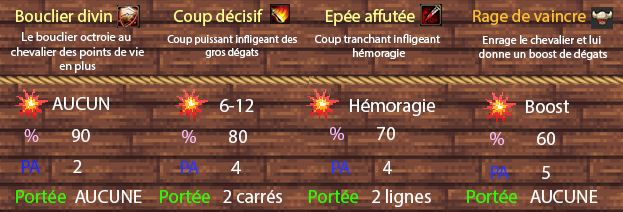
<style>
.page{position:relative;width:623px;height:212px}
.page>*{position:absolute;margin:0}
.t1{font:17.3px "MyriadPro-Regular";color:#feff8d}
.t2{font:17.3px "MyriadPro-Regular";color:#ffc12b}
.t3{font:12.2px "MyriadPro-Regular";color:#ffffff}
.t4{font:11px "MyriadPro-Regular";color:#ffffff}
.t5{font:11.7px "MyriadPro-Regular";color:#ffffff}
.t6{font:18.9px "MyriadPro-Regular";color:#ffffff}
.t7{font:18.9px "MyriadPro-Regular";color:#f8bfff}
.t8{font:18.9px "MyriadPro-Regular";color:#1329ff}
.t9{font:18.9px "MyriadPro-Regular";color:#2136ff}
.t10{font:18.9px "MyriadPro-Regular";color:#24ff00}
</style>
<div class="page">
<p class="t1" style="left:16px;top:9px;width:96px;height:13px">Bouclier divin</p>
<p class="t1" style="left:174px;top:9px;width:89px;height:17px">Coup décisif</p>
<p class="t1" style="left:326px;top:9px;width:89px;height:17px">Epée affutée</p>
<p class="t2" style="left:473px;top:9px;width:113px;height:16px">Rage de vaincre</p>
<p class="t3" style="left:11px;top:32px;width:133px;height:41px;text-align:center">Le bouclier octroie au <br>chevalier des points de vie<br>en plus</p>
<p class="t4" style="left:167px;top:35px;width:130px;height:23px;text-align:center">Coup puissant infligeant des<br>gros dégats</p>
<p class="t5" style="left:315px;top:34px;width:125px;height:25px;text-align:center">Coup tranchant infligeant <br>hémoragie</p>
<p class="t5" style="left:479px;top:35px;width:128px;height:25px;text-align:center">Enrage le chevalier et lui <br>donne un boost de dégats</p>
<p class="t6" style="left:52px;top:97px;width:57px;height:13px">AUCUN</p>
<p class="t6" style="left:220px;top:99px;width:34px;height:13px">6-12</p>
<p class="t6" style="left:350px;top:99px;width:85px;height:17px">Hémoragie</p>
<p class="t6" style="left:526px;top:100px;width:43px;height:13px">Boost</p>
<p class="t6" style="left:24px;top:129px;width:66px;height:14px"><span class="t7">%        </span>90</p>
<p class="t6" style="left:182px;top:130px;width:65px;height:14px"><span class="t7">%        </span>80</p>
<p class="t6" style="left:330px;top:127px;width:65px;height:14px"><span class="t7">%        </span>70</p>
<p class="t6" style="left:490px;top:132px;width:65px;height:14px"><span class="t7">%        </span>60</p>
<p class="t8" style="left:22px;top:160px;width:60px;height:13px">PA     <span class="t6">   2</span></p>
<p class="t9" style="left:181px;top:161px;width:60px;height:13px">PA     <span class="t6">   4</span></p>
<p class="t9" style="left:332px;top:161px;width:60px;height:13px">PA     <span class="t6">   4</span></p>
<p class="t9" style="left:491px;top:166px;width:59px;height:13px">PA     <span class="t6">   5</span></p>
<p class="t10" style="left:16px;top:190px;width:126px;height:13px">Portée <span class="t6"> AUCUNE</span></p>
<p class="t6" style="left:160px;top:190px;width:122px;height:13px"><span class="t10">Portée  </span> 2 carrés</p>
<p class="t6" style="left:309px;top:189px;width:122px;height:18px"><span class="t10">Portée  </span> 2 lignes</p>
<p class="t10" style="left:467px;top:190px;width:131px;height:13px">Portée  <span class="t6"> AUCUNE</span></p>
</div>
